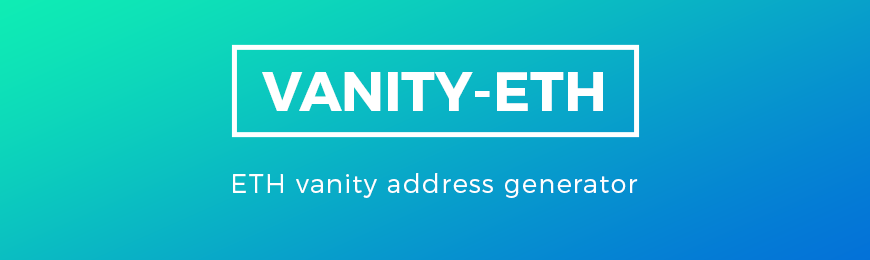
<style>
.page{position:relative;width:870px;height:260px}
.page>*{position:absolute;margin:0}
.t1{font:55px "Montserrat-Bold";color:#ffffff;text-transform:uppercase}
.t2{font:26px "Montserrat-Light";letter-spacing:0.049em;color:#ffffff}
</style>
<div class="page">
<p class="t1" style="left:262px;top:72px;width:341px;height:39px">VaNity-ETH</p>
<p class="t2" style="left:233px;top:173px;width:405px;height:25px">ETH vanity address generator</p>
</div>
